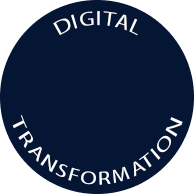
<style>
.page{position:relative;width:194px;height:194px;background:#051634}
.page>*{position:absolute;margin:0}
.t1{font:20px "MyriadPro-Regular";letter-spacing:0.065em;color:#ffffff}
.t2{font:18px "MyriadPro-Regular";letter-spacing:0.065em;color:#ffffff;scale:0.93 1}
</style>
<div class="page">
<p class="t1" style="left:53px;top:11px;width:85px;height:25px">DIGITAL</p>
<p class="t2" style="left:12px;top:115px;width:171px;height:70px;text-align:center">TRANSFORMATION</p>
</div>
